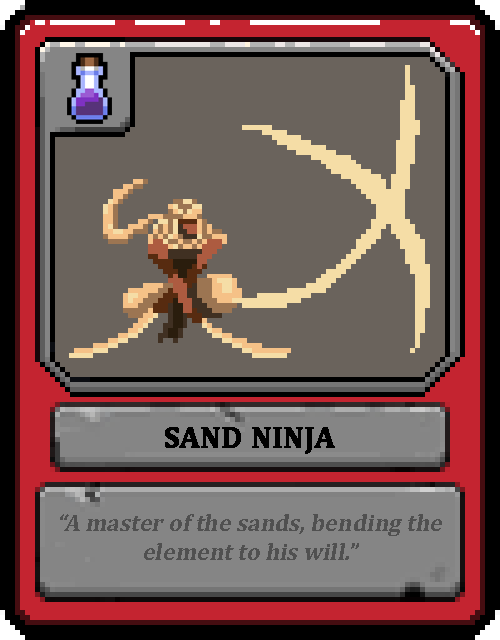
<style>
.page{position:relative;width:500px;height:640px;background:#6a635c}
.page>*{position:absolute;margin:0}
.t1{font:30px "Cambria-Bold";color:#000000;text-transform:uppercase;font-weight:bold}
.t2{font:24px "Cambria-Bold";color:#505050;font-style:italic}
</style>
<div class="page">
<p class="t1" style="left:165px;top:427px;width:170px;height:27px">Sand Ninja</p>
<p class="t2" style="left:60px;top:514px;width:382px;height:46px;text-align:center">“A master of the sands, bending the element to his will.”</p>
</div>
